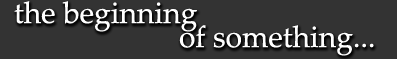
<style>
.page{position:relative;width:397px;height:59px;background:#333333}
.page>*{position:absolute;margin:0}
.t1{font:30px/24px "PalatinoLinotype-Roman";color:#ffffff}
</style>
<div class="page">
<p class="t1" style="left:14px;top:1px;width:360px;height:55px">the beginning<br>                      of something...</p>
</div>
